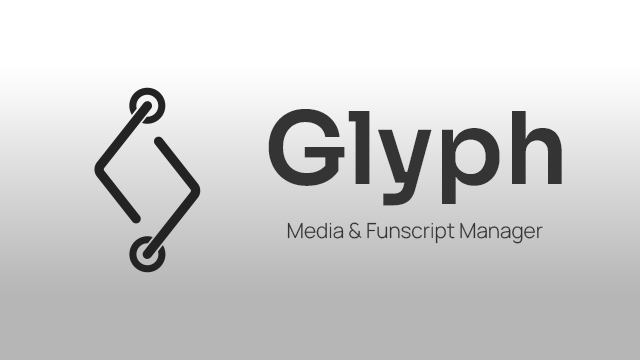
<style>
.page{position:relative;width:640px;height:360px}
.page>*{position:absolute;margin:0}
.t1{font:100px "Sora-SemiBold";color:#343434}
.t2{font:20.8px "Manrope-Light";color:#343434}
</style>
<div class="page">
<p class="t1" style="left:268px;top:109px;width:294px;height:97px">Glyph</p>
<p class="t2" style="left:287px;top:222px;width:256px;height:22px">Media &amp; Funscript Manager</p>
</div>
